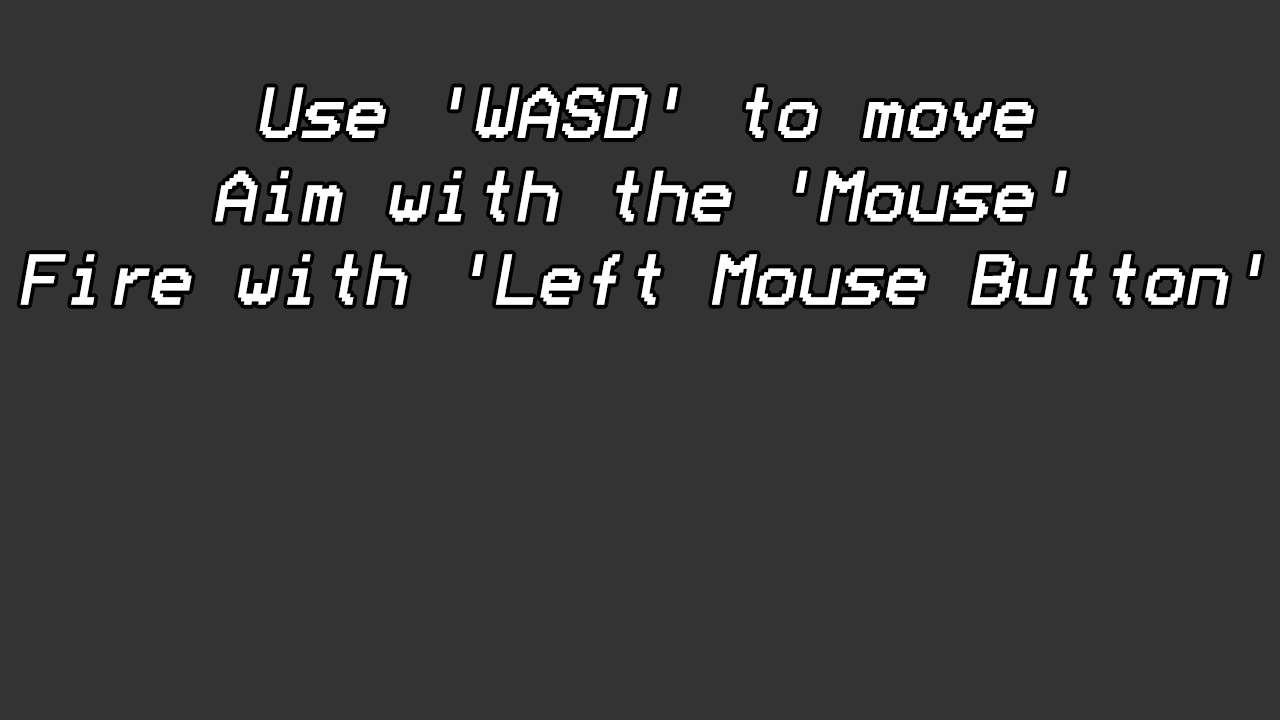
<style>
.page{position:relative;width:1280px;height:720px;background:#333333}
.page>*{position:absolute;margin:0}
.t1{font:72px/83.3px "ModeSeven";color:#ffffff;font-style:italic}
</style>
<div class="page">
<p class="t1" style="left:20px;top:87px;width:1241px;height:218px;text-align:center">Use 'WASD' to move<br>Aim with the 'Mouse'<br>Fire with 'Left Mouse Button'</p>
</div>
